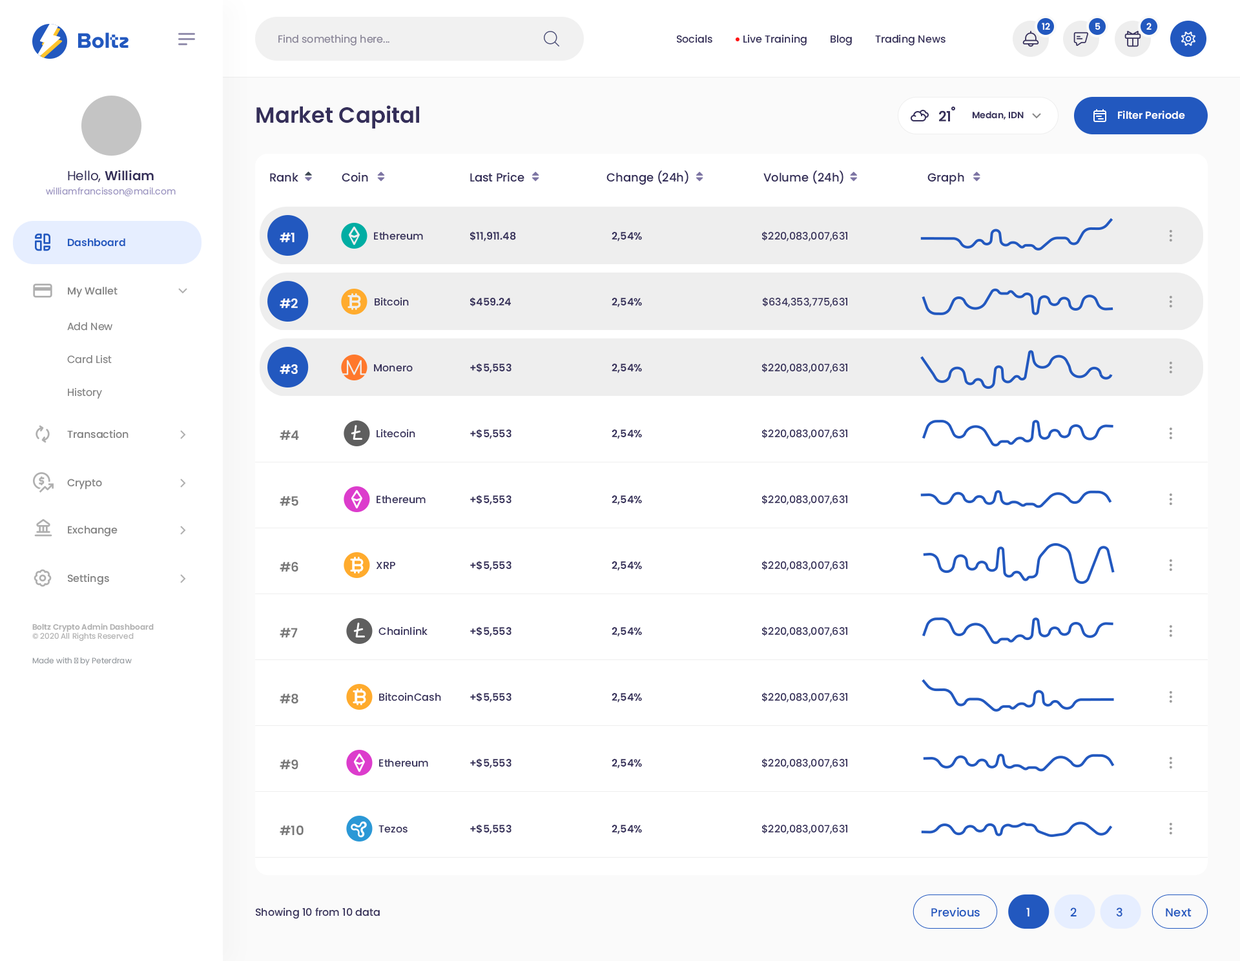
<style>
.page{position:relative;width:1240px;height:961px;background:#ffffff}
.page>*{position:absolute;margin:0}
.t1{font:9px "Poppins-SemiBold";color:#ffffff}
.t2{font:10.3px "Poppins-Regular";color:#868295}
.t3{font:10.3px "Poppins-Medium";color:#342e59}
.t4{font:22px "Poppins-SemiBold";color:#342e59}
.t5{font:14.2px "Poppins-SemiBold";color:#342e59}
.t6{font:9px "Poppins-SemiBold";color:#342e59}
.t7{font:10.3px "Poppins-SemiBold";color:#ffffff}
.t8{font:12.9px "Poppins-SemiBold";color:#342e59}
.t9{font:12.9px "Poppins-Regular";color:#342e59}
.t10{font:11.6px "Poppins-Medium";color:#342e59}
.t11{font:9px "Poppins-Regular";color:#9b94c1}
.t12{font:12.9px "Poppins-SemiBold";color:#ffffff}
.t13{font:10.3px "Poppins-SemiBold";color:#342e59}
.t14{font:10.3px "Poppins-SemiBold";color:#2258bf}
.t15{font:10.3px "Poppins-Medium";color:#818181}
.t16{font:10.3px "Poppins-Regular";color:#818181}
.t17{font:12.9px "Poppins-SemiBold";color:#787878}
.t18{font:7.8px "Poppins-SemiBold";color:#afafaf}
.t19{font:7.8px "Poppins-Regular";color:#afafaf}
.t20{font:7.8px "Poppins-Regular";color:#969ba0}
.t21{font:11.6px "Poppins-Medium";color:#2258bf}
.t22{font:11.6px "Poppins-Medium";color:#ffffff}
</style>
<div class="page">
<p class="t1" style="left:1042px;top:23px;width:8px;height:7px">12</p>
<p class="t1" style="left:1096px;top:23px;width:5px;height:7px">5</p>
<p class="t1" style="left:1147px;top:23px;width:5px;height:7px">2</p>
<p class="t2" style="left:278px;top:34px;width:112px;height:12px">Find something here...</p>
<p class="t3" style="left:677px;top:34px;width:36px;height:9px">Socials</p>
<p class="t3" style="left:744px;top:34px;width:63px;height:12px">Live Training</p>
<p class="t3" style="left:831px;top:35px;width:21px;height:11px">Blog</p>
<p class="t3" style="left:875px;top:34px;width:71px;height:12px">Trading News</p>
<p class="t4" style="left:256px;top:105px;width:163px;height:24px">Market Capital</p>
<p class="t5" style="left:939px;top:110px;width:11px;height:11px">21</p>
<p class="t6" style="left:972px;top:111px;width:52px;height:9px">Medan, IDN</p>
<p class="t7" style="left:1118px;top:110px;width:67px;height:10px">Filter Periode</p>
<p class="t8" style="left:68px;top:170px;width:86px;height:12px"><span class="t9">Hello, </span>William</p>
<p class="t10" style="left:270px;top:172px;width:28px;height:10px">Rank</p>
<p class="t10" style="left:342px;top:172px;width:26px;height:10px">Coin</p>
<p class="t10" style="left:470px;top:172px;width:55px;height:10px">Last Price</p>
<p class="t10" style="left:607px;top:171px;width:82px;height:14px">Change (24h)</p>
<p class="t10" style="left:764px;top:171px;width:80px;height:13px">Volume (24h)</p>
<p class="t10" style="left:928px;top:172px;width:37px;height:13px">Graph</p>
<p class="t11" style="left:46px;top:187px;width:130px;height:9px">williamfrancisson@mail.com</p>
<p class="t12" style="left:280px;top:233px;width:15px;height:9px">#1</p>
<p class="t3" style="left:374px;top:232px;width:49px;height:8px">Ethereum</p>
<p class="t13" style="left:470px;top:231px;width:46px;height:11px">$11,911.48</p>
<p class="t13" style="left:612px;top:232px;width:30px;height:10px">2,54%</p>
<p class="t3" style="left:762px;top:231px;width:86px;height:11px">$220,083,007,631</p>
<p class="t14" style="left:68px;top:238px;width:57px;height:9px">Dashboard</p>
<p class="t15" style="left:68px;top:287px;width:50px;height:11px">My Wallet</p>
<p class="t12" style="left:280px;top:298px;width:18px;height:10px">#2</p>
<p class="t3" style="left:375px;top:297px;width:34px;height:9px">Bitcoin</p>
<p class="t13" style="left:470px;top:297px;width:41px;height:10px">$459.24</p>
<p class="t13" style="left:612px;top:298px;width:30px;height:10px">2,54%</p>
<p class="t3" style="left:763px;top:297px;width:85px;height:11px">$634,353,775,631</p>
<p class="t16" style="left:67px;top:322px;width:45px;height:9px">Add New</p>
<p class="t16" style="left:67px;top:355px;width:45px;height:9px">Card List</p>
<p class="t12" style="left:280px;top:364px;width:18px;height:10px">#3</p>
<p class="t3" style="left:374px;top:364px;width:39px;height:8px">Monero</p>
<p class="t13" style="left:470px;top:363px;width:42px;height:10px">+$5,553</p>
<p class="t13" style="left:612px;top:364px;width:30px;height:9px">2,54%</p>
<p class="t3" style="left:762px;top:363px;width:86px;height:10px">$220,083,007,631</p>
<p class="t16" style="left:68px;top:388px;width:34px;height:11px">History</p>
<p class="t15" style="left:67px;top:430px;width:62px;height:9px">Transaction</p>
<p class="t17" style="left:280px;top:430px;width:19px;height:10px">#4</p>
<p class="t3" style="left:377px;top:429px;width:38px;height:9px">Litecoin</p>
<p class="t13" style="left:470px;top:429px;width:42px;height:10px">+$5,553</p>
<p class="t13" style="left:612px;top:430px;width:30px;height:9px">2,54%</p>
<p class="t3" style="left:762px;top:429px;width:86px;height:10px">$220,083,007,631</p>
<p class="t15" style="left:67px;top:479px;width:35px;height:11px">Crypto</p>
<p class="t17" style="left:280px;top:496px;width:18px;height:10px">#5</p>
<p class="t3" style="left:377px;top:496px;width:49px;height:8px">Ethereum</p>
<p class="t13" style="left:470px;top:495px;width:42px;height:10px">+$5,553</p>
<p class="t13" style="left:612px;top:496px;width:30px;height:9px">2,54%</p>
<p class="t3" style="left:762px;top:495px;width:86px;height:10px">$220,083,007,631</p>
<p class="t15" style="left:68px;top:526px;width:50px;height:11px">Exchange</p>
<p class="t17" style="left:280px;top:562px;width:18px;height:10px">#6</p>
<p class="t3" style="left:376px;top:561px;width:19px;height:8px">XRP</p>
<p class="t13" style="left:470px;top:561px;width:42px;height:10px">+$5,553</p>
<p class="t13" style="left:612px;top:561px;width:30px;height:10px">2,54%</p>
<p class="t3" style="left:762px;top:561px;width:86px;height:10px">$220,083,007,631</p>
<p class="t15" style="left:68px;top:574px;width:41px;height:11px">Settings</p>
<p class="t18" style="left:32px;top:623px;width:122px;height:19px">Boltz Crypto Admin Dashboard<br><span class="t19">© 2020 All Rights Reserved</span></p>
<p class="t17" style="left:280px;top:628px;width:18px;height:10px">#7</p>
<p class="t3" style="left:379px;top:627px;width:49px;height:9px">Chainlink</p>
<p class="t13" style="left:470px;top:627px;width:42px;height:10px">+$5,553</p>
<p class="t13" style="left:612px;top:627px;width:30px;height:10px">2,54%</p>
<p class="t3" style="left:762px;top:627px;width:86px;height:10px">$220,083,007,631</p>
<p class="t20" style="left:32px;top:657px;width:100px;height:9px">Made with ♥ by Peterdraw</p>
<p class="t17" style="left:280px;top:694px;width:18px;height:10px">#8</p>
<p class="t3" style="left:379px;top:693px;width:62px;height:9px">BitcoinCash</p>
<p class="t13" style="left:470px;top:693px;width:42px;height:10px">+$5,553</p>
<p class="t13" style="left:612px;top:693px;width:30px;height:10px">2,54%</p>
<p class="t3" style="left:762px;top:693px;width:86px;height:10px">$220,083,007,631</p>
<p class="t17" style="left:280px;top:760px;width:18px;height:9px">#9</p>
<p class="t3" style="left:379px;top:759px;width:49px;height:9px">Ethereum</p>
<p class="t13" style="left:470px;top:758px;width:42px;height:11px">+$5,553</p>
<p class="t13" style="left:612px;top:759px;width:30px;height:10px">2,54%</p>
<p class="t3" style="left:762px;top:758px;width:86px;height:11px">$220,083,007,631</p>
<p class="t17" style="left:280px;top:826px;width:24px;height:9px">#10</p>
<p class="t3" style="left:379px;top:826px;width:29px;height:7px">Tezos</p>
<p class="t13" style="left:470px;top:824px;width:42px;height:11px">+$5,553</p>
<p class="t13" style="left:612px;top:825px;width:30px;height:10px">2,54%</p>
<p class="t3" style="left:762px;top:824px;width:86px;height:11px">$220,083,007,631</p>
<p class="t3" style="left:256px;top:908px;width:124px;height:11px">Showing 10 from 10 data</p>
<p class="t21" style="left:932px;top:908px;width:48px;height:9px">Previous</p>
<p class="t22" style="left:1027px;top:908px;width:3px;height:9px">1</p>
<p class="t21" style="left:1071px;top:908px;width:6px;height:9px">2</p>
<p class="t21" style="left:1116px;top:908px;width:7px;height:9px">3</p>
<p class="t21" style="left:1166px;top:908px;width:26px;height:9px">Next</p>
</div>
